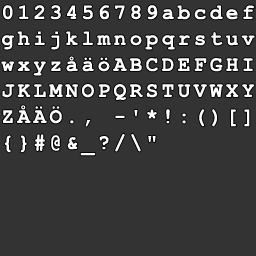
<style>
.page{position:relative;width:256px;height:256px;background:#333333}
.page>*{position:absolute;margin:0}
.t1{font:21px/26px "CourierNewPS-BoldMT";letter-spacing:0.163em;color:#ffffff}
</style>
<div class="page">
<p class="t1" style="left:1px;top:5px;width:254px;height:151px">0123456789abcdef<br>ghijklmnopqrstuv<br>wxyzåäöABCDEFGHI<br>JKLMNOPQRSTUVWXY<br>ZÅÄÖ., -'*!:()[]<br>{}#@&amp;_?/\"</p>
</div>
